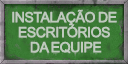
<style>
.page{position:relative;width:128px;height:64px}
.page>*{position:absolute;margin:0}
.t1{font:14px/15px "ArialMT";letter-spacing:-0.09em;color:#d0d6cf;text-transform:uppercase;font-weight:bold}
</style>
<div class="page">
<p class="t1" style="left:12px;top:9px;width:105px;height:45px;text-align:center;opacity:0.85">INSTALAÇÃO DE<br>Escritórios<br> da equipe</p>
</div>
